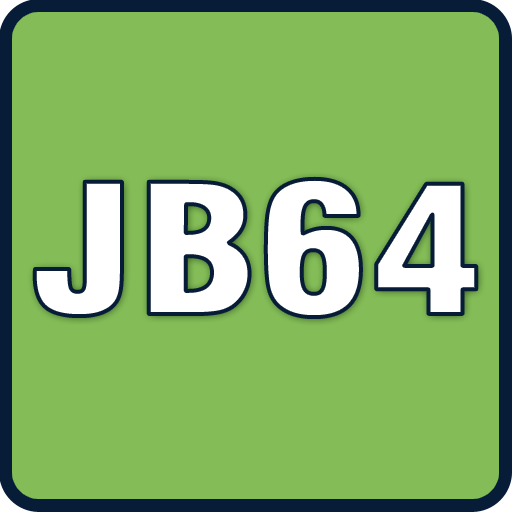
<style>
.page{position:relative;width:512px;height:512px;background:#84bd57}
.page>*{position:absolute;margin:0}
.t1{font:175px "Swiss721BT-BlackCondensed";color:#ffffff;scale:1.2 1}
</style>
<div class="page">
<p class="t1" style="left:34px;top:178px;width:443px;height:139px">JB64</p>
</div>
